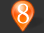
<style>
.page{position:relative;width:44px;height:33px;background:#333333}
.page>*{position:absolute;margin:0}
.t1{font:30px "STSong";color:#ffffff}
</style>
<div class="page">
<p class="t1" style="left:17px;top:3px;width:12px;height:21px">8</p>
</div>
